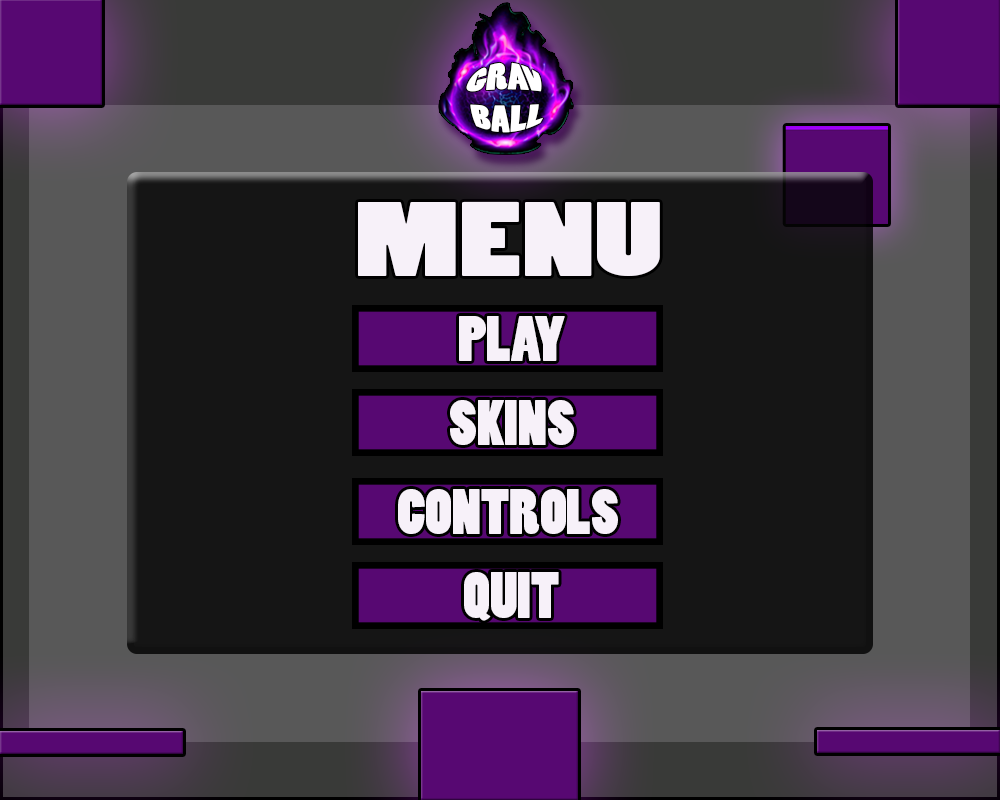
<style>
.page{position:relative;width:1000px;height:800px;background:#151515}
.page>*{position:absolute;margin:0}
.t1{font:25.4px "PoplarStd";color:#fefbff;scale:1.25 1}
.t2{font:99.2px "PoplarStd";color:#f7f1f9;scale:1.52 1}
.t3{font:60px "PoplarStd";color:#f7f1f9}
.t4{font:61.8px "PoplarStd";color:#f7f1f9}
</style>
<div class="page">
<p class="t1" style="left:466px;top:62px;width:77px;height:71px">GRAV<br>BALL</p>
<p class="t2" style="left:358px;top:201px;width:302px;height:75px">MENU</p>
<p class="t3" style="left:459px;top:316px;width:106px;height:45px">PLAY</p>
<p class="t3" style="left:450px;top:400px;width:124px;height:45px">SKINS</p>
<p class="t3" style="left:398px;top:489px;width:220px;height:45px">CONTROLS</p>
<p class="t4" style="left:464px;top:572px;width:95px;height:49px">QUIT</p>
</div>
